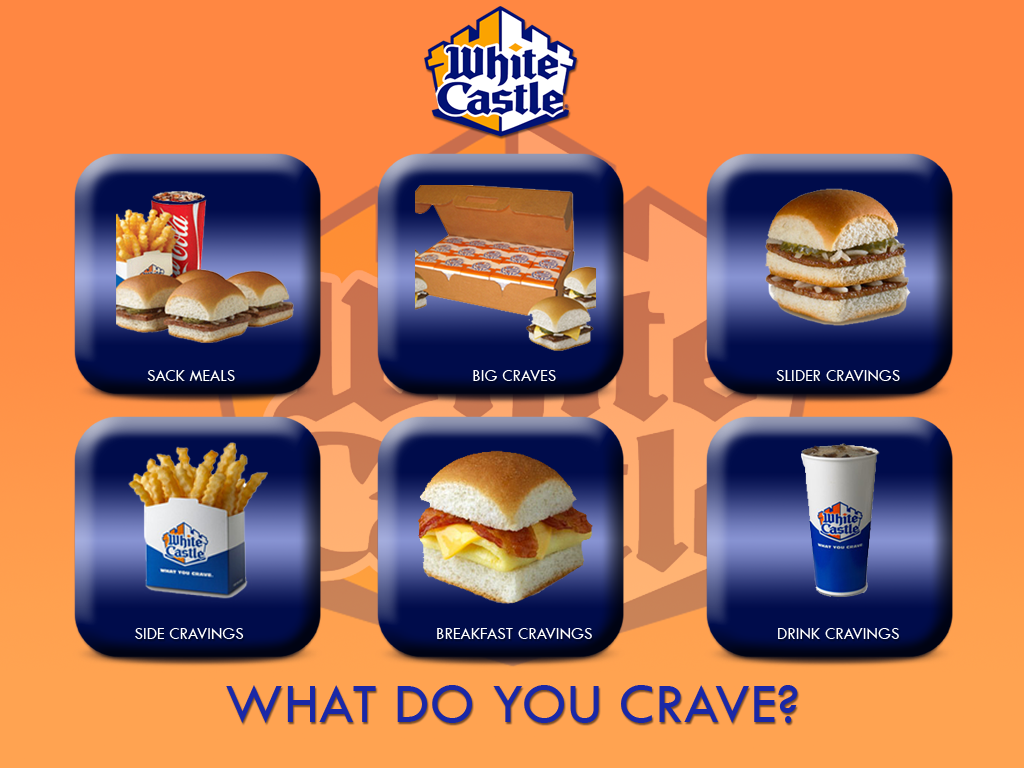
<style>
.page{position:relative;width:1024px;height:768px;background:#ff8742}
.page>*{position:absolute;margin:0}
.t1{font:16.7px "TwCenMT-Regular";letter-spacing:0.01em;color:#ffffff;font-variant:small-caps}
.t2{font:57.9px "TwCenMT-Regular";letter-spacing:0.01em;color:#1a28a7;font-variant:small-caps}
</style>
<div class="page">
<p class="t1" style="left:147px;top:370px;width:88px;height:11px">SACK MEALS</p>
<p class="t1" style="left:473px;top:370px;width:83px;height:11px">BIG CRAVES</p>
<p class="t1" style="left:776px;top:370px;width:124px;height:11px">SLIDER CRAVINGS</p>
<p class="t1" style="left:135px;top:628px;width:109px;height:11px">SIDE CRAVINGS</p>
<p class="t1" style="left:437px;top:628px;width:155px;height:11px">BREAKFAST CRAVINGS</p>
<p class="t1" style="left:778px;top:628px;width:121px;height:11px">DRINK CRAVINGS</p>
<p class="t2" style="left:226px;top:685px;width:572px;height:38px">WHAT DO YOU CRAVE?</p>
</div>
